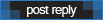
<style>
.page{position:relative;width:103px;height:20px;background:#222222}
.page>*{position:absolute;margin:0}
.t1{font:14px "Gautami";letter-spacing:-0.05em;color:#ffffff}
</style>
<div class="page">
<p class="t1" style="left:27px;top:5px;width:50px;height:12px">post reply</p>
</div>
